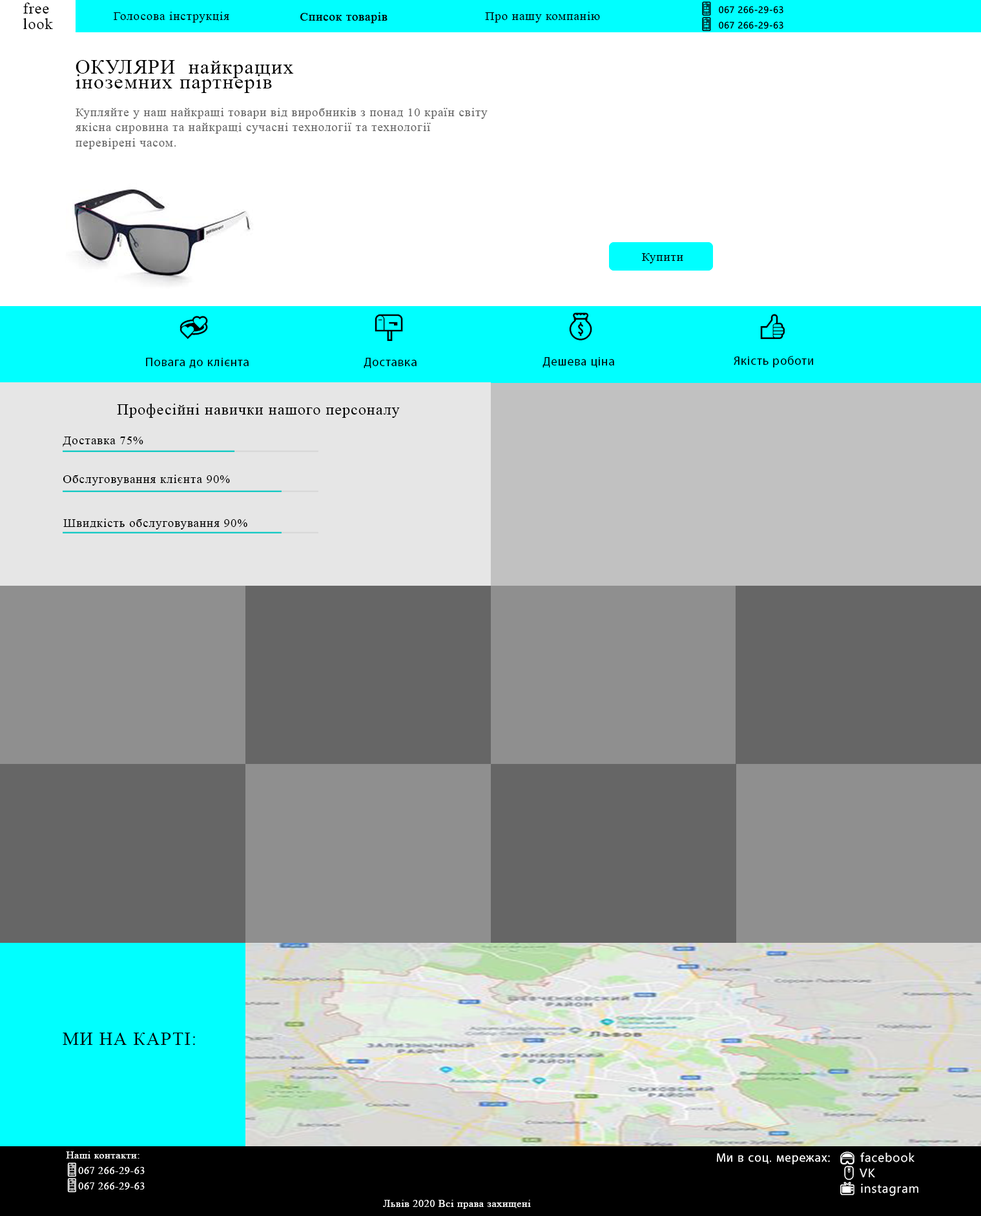
<style>
.page{position:relative;width:981px;height:1216px}
.page>*{position:absolute;margin:0}
.t1{font:15.3px/15.3px "TimesNewRomanPSMT";letter-spacing:0.05em;color:#000000}
.t2{font:12.3px "TimesNewRomanPSMT";letter-spacing:0.05em;color:#000000}
.t3{font:20.4px/15.3px "TimesNewRomanPSMT";letter-spacing:0.05em;color:#000000}
.t4{font:12.3px/15.3px "TimesNewRomanPSMT";letter-spacing:0.05em;color:#666666}
.t5{font:12.3px/15.3px "MyriadPro-Regular";letter-spacing:0.05em;color:#000000}
.t6{font:24.5px/15.3px "SegoeUIEmoji";letter-spacing:0.05em;color:#000000}
.t7{font:15.3px "TimesNewRomanPSMT";letter-spacing:0.05em;color:#000000}
.t8{font:18.4px "TimesNewRomanPSMT";letter-spacing:0.05em;color:#000000}
.t9{font:10.2px/15.3px "TimesNewRomanPSMT";letter-spacing:0.05em;color:#ffffff}
.t10{font:12.3px/15.3px "SegoeUIEmoji";letter-spacing:0.05em;color:#ffffff}
.t11{font:10.2px "TimesNewRomanPSMT";letter-spacing:0.05em;color:#ffffff}
</style>
<div class="page">
<p class="t1" style="left:23px;top:3px;width:30px;height:26px">free<br>look</p>
<p class="t2" style="left:114px;top:12px;width:115px;height:11px">Голосова інструкція</p>
<p class="t2" style="left:300px;top:12px;width:87px;height:11px">Список товарів</p>
<p class="t2" style="left:300px;top:12px;width:87px;height:11px">Список товарів</p>
<p class="t2" style="left:485px;top:12px;width:115px;height:11px">Про нашу компанію</p>
<p class="t3" style="left:76px;top:60px;width:218px;height:33px">ОКУЛЯРИ  найкращих <br>іноземних партнерів</p>
<p class="t4" style="left:75px;top:108px;width:412px;height:41px">Купляйте у наш найкращі товари від виробників з понад 10 країн світу<br>якісна сировина та найкращі сучасні технології та технології <br>перевірені часом.</p>
<p class="t2" style="left:642px;top:253px;width:41px;height:10px">Купити</p>
<p class="t2" style="left:642px;top:253px;width:41px;height:10px">Купити</p>
<p class="t5" style="left:146px;top:316px;width:103px;height:52px"><span class="t6">    💞<br><br></span>Повага до клієнта</p>
<p class="t5" style="left:364px;top:314px;width:52px;height:54px"><span class="t6"> 📪<br><br></span>Доставка</p>
<p class="t5" style="left:542px;top:313px;width:72px;height:54px"><span class="t6">   💰<br><br></span>Дешева ціна</p>
<p class="t7" style="left:117px;top:404px;width:283px;height:14px">Професійні навички нашого персоналу</p>
<p class="t2" style="left:63px;top:436px;width:80px;height:11px">Доставка 75%</p>
<p class="t2" style="left:63px;top:475px;width:167px;height:11px">Обслуговування клієнта 90%</p>
<p class="t2" style="left:63px;top:518px;width:184px;height:11px">Швидкість обслуговування 90%</p>
<p class="t8" style="left:63px;top:1032px;width:132px;height:13px">МИ НА КАРТІ:</p>
<p class="t9" style="left:66px;top:1151px;width:79px;height:42px">Наші контакти:<br><span class="t10">📱</span>067 266-29-63<br><span class="t10">📱</span>067 266-29-63</p>
<p class="t11" style="left:383px;top:1200px;width:148px;height:9px">Львів 2020 Всі права захищені</p>
</div>
